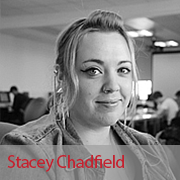
<style>
.page{position:relative;width:180px;height:180px}
.page>*{position:absolute;margin:0}
.t1{font:18px "MyriadPro-Regular";letter-spacing:-0.025em;color:#c32230}
</style>
<div class="page">
<p class="t1" style="left:7px;top:155px;width:117px;height:17px">Stacey Chadfield</p>
</div>
